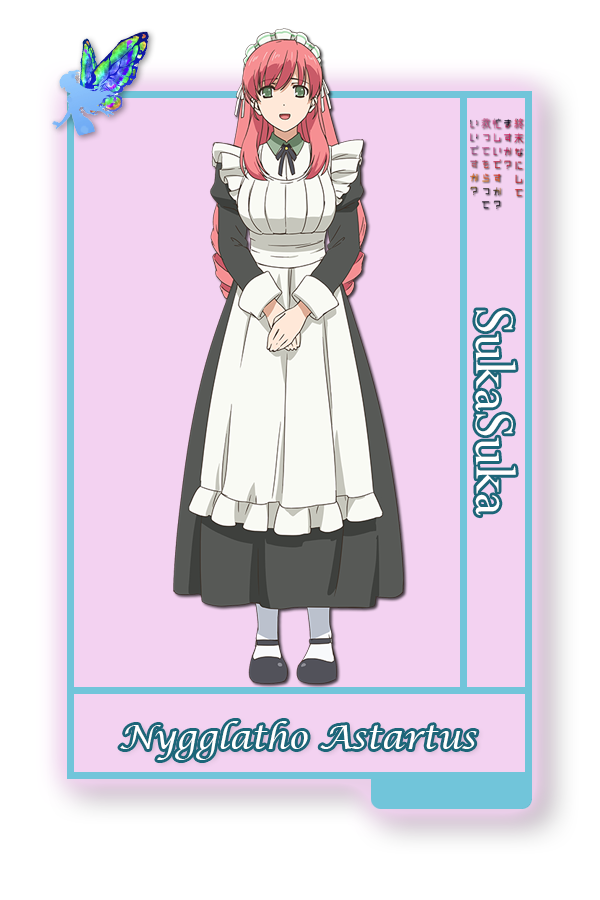
<style>
.page{position:relative;width:600px;height:900px;background:#f3d2f1}
.page>*{position:absolute;margin:0}
.t1{font:62.5px "Perpetua";color:#ffffff}
.t2{font:33.3px "LucidaCalligraphy-Italic";color:#ffffff}
</style>
<div class="page">
<p class="t1" style="left:475px;top:310px;width:41px;height:206px;rotate:90deg">SukaSuka</p>
<p class="t2" style="left:120px;top:721px;width:357px;height:39px">Nygglatho Astartus</p>
</div>
